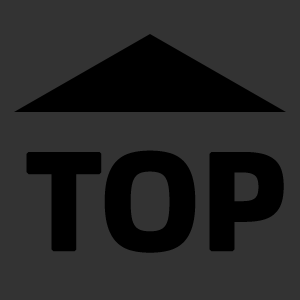
<style>
.page{position:relative;width:300px;height:300px;background:#333333}
.page>*{position:absolute;margin:0}
.t1{font:137.5px "AlibabaPuHuiTi-Bold";letter-spacing:-0.1em;color:#000000;text-transform:uppercase;font-weight:bold}
</style>
<div class="page">
<p class="t1" style="left:26px;top:150px;width:258px;height:103px">TOP</p>
</div>
